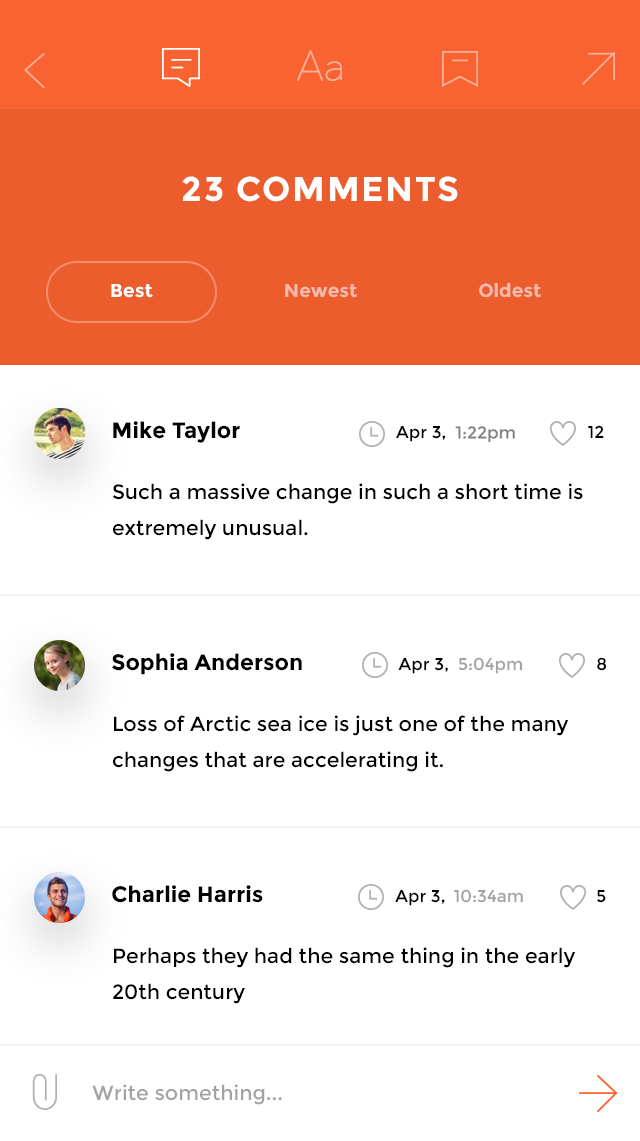
<style>
.page{position:relative;width:640px;height:1141px;background:#ffffff}
.page>*{position:absolute;margin:0}
.t1{font:34.2px "Montserrat-Bold";letter-spacing:0.05em;color:#ffffff}
.t2{font:18.8px "Montserrat-Bold";color:#ffffff}
.t3{font:18.8px "Montserrat-Bold";color:#f6baac}
.t4{font:22.2px "Montserrat-Bold";color:#000000}
.t5{font:17.1px "Montserrat-Regular";color:#000000}
.t6{font:20.5px/35.9px "Montserrat-Regular";color:#000000}
.t7{font:17.1px "Montserrat-Regular";color:#a3a3a3}
.t8{font:10.3px/35.9px "Montserrat-Regular";color:#a3a3a3}
</style>
<div class="page">
<p class="t1" style="left:182px;top:176px;width:276px;height:26px">23 COMMENTS</p>
<p class="t2" style="left:111px;top:284px;width:42px;height:14px">Best</p>
<p class="t3" style="left:285px;top:284px;width:72px;height:14px">Newest</p>
<p class="t3" style="left:479px;top:283px;width:62px;height:15px">Oldest</p>
<p class="t4" style="left:113px;top:421px;width:127px;height:22px">Mike Taylor</p>
<p class="t5" style="left:396px;top:425px;width:50px;height:17px">Apr 3,</p>
<p class="t5" style="left:588px;top:425px;width:16px;height:14px">12</p>
<p class="t6" style="left:112px;top:483px;width:471px;height:57px">Such a massive change in such a short time is<br>extremely unusual.</p>
<p class="t4" style="left:112px;top:653px;width:190px;height:22px">Sophia Anderson</p>
<p class="t5" style="left:398px;top:657px;width:50px;height:17px">Apr 3,</p>
<p class="t7" style="left:458px;top:657px;width:65px;height:17px">5:04pm</p>
<p class="t5" style="left:597px;top:657px;width:10px;height:14px">8</p>
<p class="t6" style="left:113px;top:715px;width:456px;height:57px">Loss of Arctic sea ice is just one of the many<br>changes that are accelerating it.</p>
<p class="t4" style="left:112px;top:885px;width:151px;height:18px">Charlie Harris</p>
<p class="t5" style="left:395px;top:889px;width:50px;height:17px">Apr 3,</p>
<p class="t7" style="left:454px;top:889px;width:69px;height:14px">10:34am</p>
<p class="t5" style="left:597px;top:889px;width:9px;height:14px">5</p>
<p class="t6" style="left:113px;top:947px;width:463px;height:57px">Perhaps they had the same thing in the early<br>20th century</p>
<p class="t8" style="left:92px;top:1084px;width:190px;height:21px">Write something...</p>
</div>
